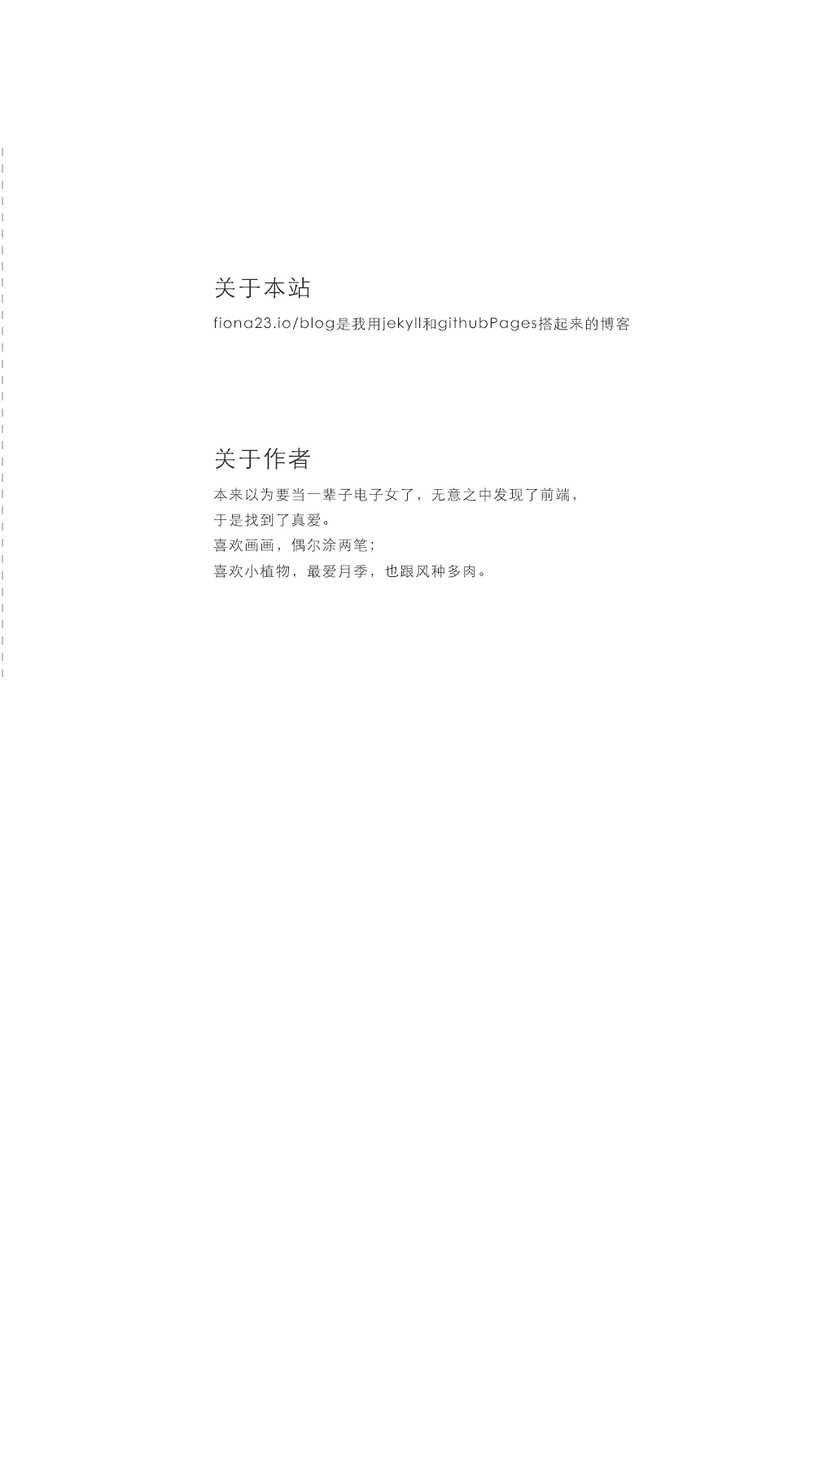
<style>
.page{position:relative;width:814px;height:1465px;background:#ffffff}
.page>*{position:absolute;margin:0}
.t1{font:14.5px "STXihei";letter-spacing:0.075em;color:#252525}
.t2{font:23.2px "STXihei";letter-spacing:0.075em;color:#252525}
</style>
<div class="page">
<p class="t1" style="left:213px;top:277px;width:417px;height:54px"><span class="t2">关于本站<br></span>fiona23.io/blog是我用jekyll和githubPages搭起来的博客</p>
<p class="t1" style="left:213px;top:448px;width:362px;height:130px"><span class="t2">关于作者<br></span>本来以为要当一辈子电子女了，无意之中发现了前端，<br>于是找到了真爱。<br>喜欢画画，偶尔涂两笔；<br>喜欢小植物，最爱月季，也跟风种多肉。</p>
</div>
